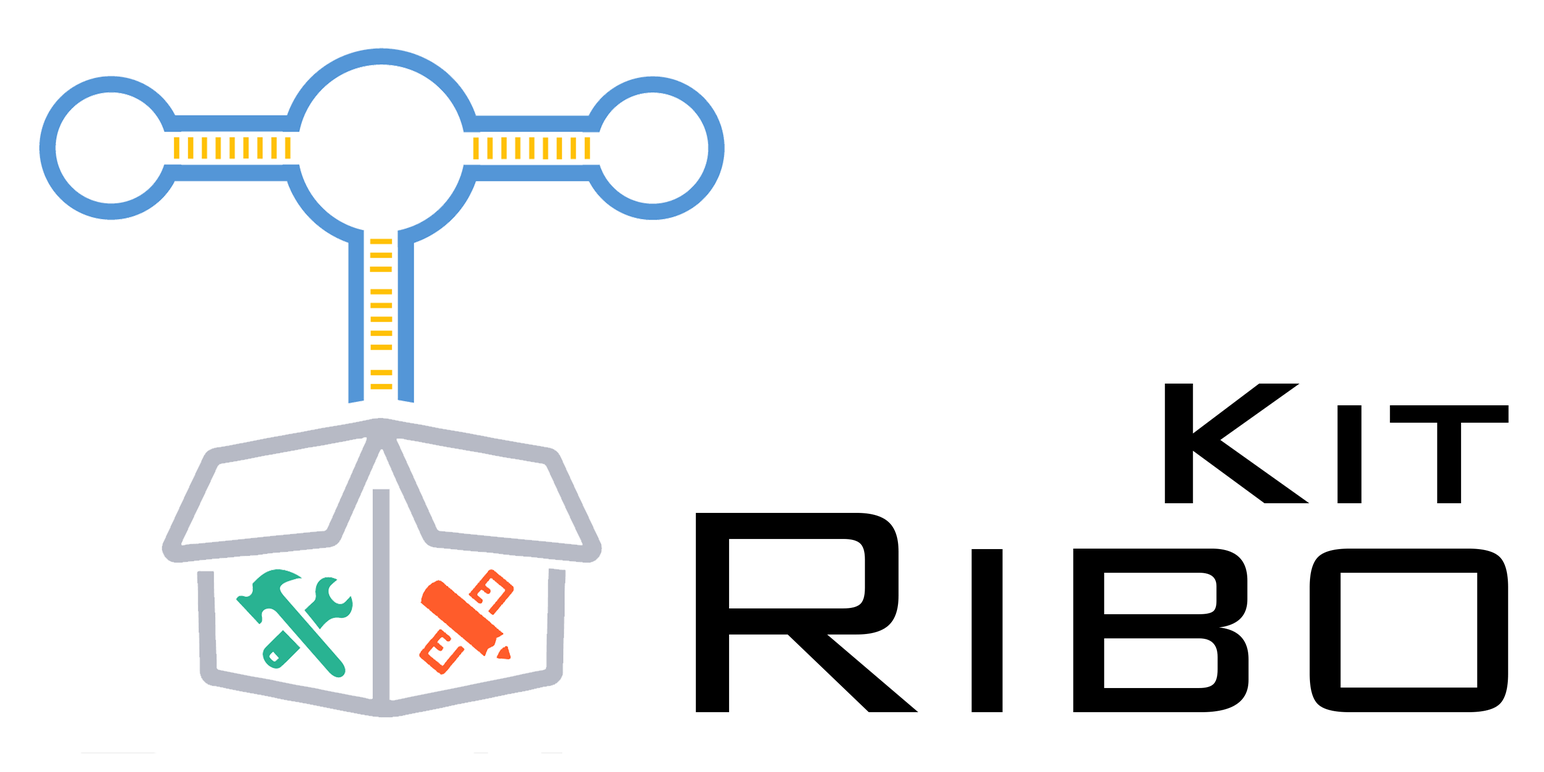
<style>
.page{position:relative;width:1544px;height:772px;background:#ffffff}
.page>*{position:absolute;margin:0}
.t1{font:231.6px "BankGothic-Medium";letter-spacing:-0.01em;color:#000000}
.t2{font:386.1px "BankGothic-Light";letter-spacing:-0.01em;color:#000000}
</style>
<div class="page">
<p class="t1" style="left:1165px;top:384px;width:344px;height:119px">Kit</p>
<p class="t2" style="left:696px;top:513px;width:813px;height:199px">Ribo</p>
</div>
